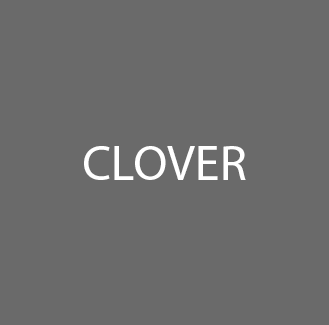
<style>
.page{position:relative;width:329px;height:325px;background:#6a6a6a}
.page>*{position:absolute;margin:0}
.t1{font:50px "MyriadPro-Regular";color:#ffffff;text-transform:uppercase}
</style>
<div class="page">
<p class="t1" style="left:84px;top:146px;width:162px;height:34px">Clover</p>
</div>
